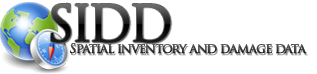
<style>
.page{position:relative;width:317px;height:74px;background:#ffffff}
.page>*{position:absolute;margin:0}
.t1{font:48px "TrajanPro-Regular";letter-spacing:-0.1em;font-weight:bold}
.t2{font:13.3px "TrajanPro-Regular";letter-spacing:-0.1em;font-weight:bold}
</style>
<div class="page">
<p class="t1" style="left:51px;top:3px;width:120px;height:40px">SIDD</p>
<p class="t2" style="left:70px;top:43px;width:237px;height:11px">Spatial inventory and damage data</p>
</div>
